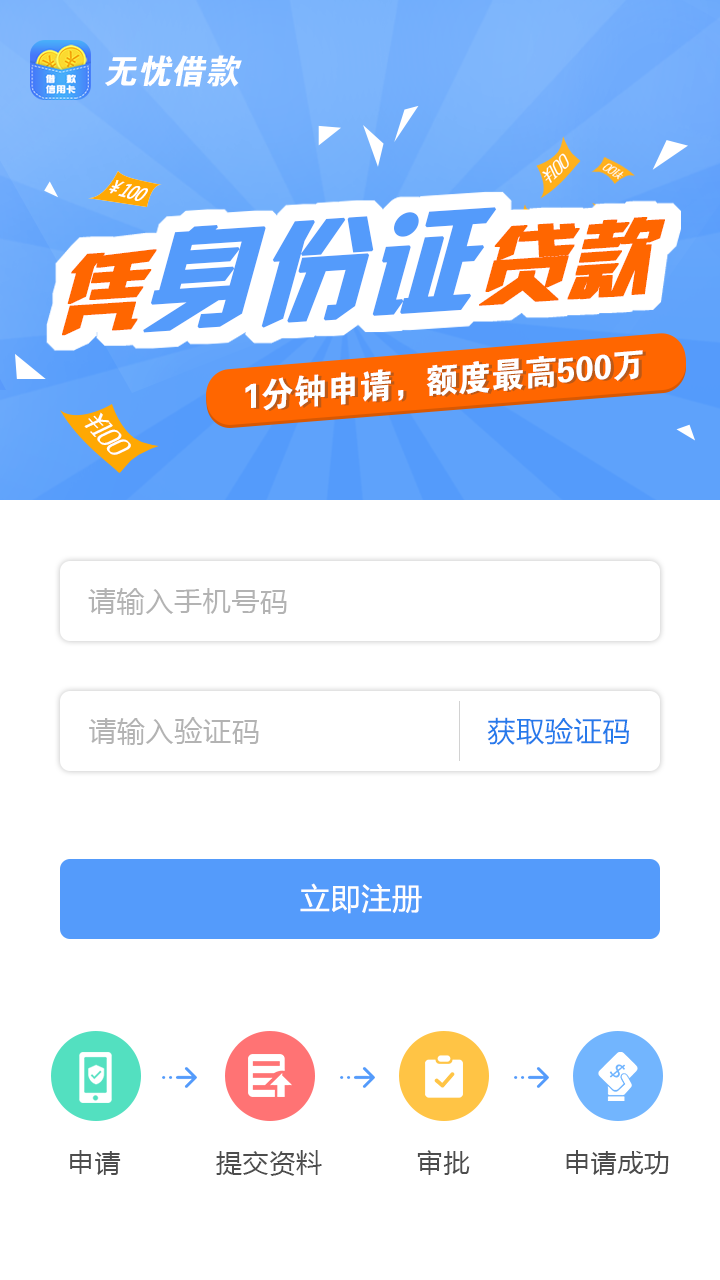
<style>
.page{position:relative;width:720px;height:1280px;background:#ffffff}
.page>*{position:absolute;margin:0}
.t1{font:33.9px "FZDHTJW--GB1-0";color:#fffefe;font-style:italic}
.t2{font:115.8px "HYk2gj";color:#549bfb;font-weight:bold;scale:0.95 1}
.t3{font:89.5px "HYk2gj";color:#ff6600;font-weight:bold;scale:0.95 1}
.t4{font:34.9px "FZDHTJW--GB1-0";color:#ffffff;scale:0.95 1}
.t5{font:28px "MicrosoftYaHei";letter-spacing:0.025em;color:#b3b3b3}
.t6{font:28px "MicrosoftYaHei";letter-spacing:0.025em;color:#267aeb}
.t7{font:30px "MicrosoftYaHei";letter-spacing:0.025em;color:#fefefe}
.t8{font:26px "MicrosoftYaHei";letter-spacing:0.025em;color:#4d4d4d}
</style>
<div class="page">
<p class="t1" style="left:105px;top:55px;width:137px;height:32px">无忧借款</p>
<p class="t2" style="left:62px;top:207px;width:603px;height:129px;rotate:-4deg"><span class="t3">凭</span>身份证<span class="t3">贷款</span></p>
<p class="t4" style="left:245px;top:350px;width:398px;height:61px;rotate:-5deg">1分钟申请，额度最高500万</p>
<p class="t5" style="left:88px;top:588px;width:199px;height:27px">请输入手机号码</p>
<p class="t5" style="left:89px;top:717px;width:170px;height:28px">请输入验证码</p>
<p class="t6" style="left:487px;top:717px;width:142px;height:28px">获取验证码</p>
<p class="t7" style="left:300px;top:883px;width:122px;height:31px">立即注册</p>
<p class="t8" style="left:70px;top:1150px;width:51px;height:25px">申请</p>
<p class="t8" style="left:216px;top:1150px;width:106px;height:26px">提交资料</p>
<p class="t8" style="left:417px;top:1150px;width:53px;height:25px">审批</p>
<p class="t8" style="left:566px;top:1150px;width:103px;height:25px">申请成功</p>
</div>
